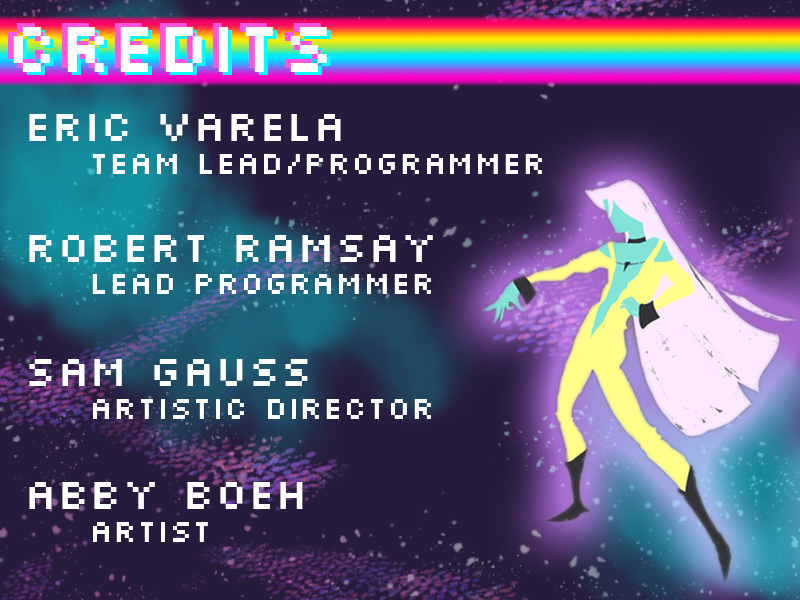
<style>
.page{position:relative;width:800px;height:600px}
.page>*{position:absolute;margin:0}
.t1{font:75px "Silkscreen"}
.t2{font:75px "Silkscreen";color:#ffffff}
.t3{font:45.8px "Silkscreen";color:#ffffff}
.t4{font:33.3px "Silkscreen";color:#ffffff}
</style>
<div class="page">
<p class="t1" style="left:7px;top:23px;width:314px;height:45px">Credits</p>
<p class="t2" style="left:13px;top:27px;width:314px;height:45px">Credits</p>
<p class="t1" style="left:17px;top:30px;width:314px;height:45px">Credits</p>
<p class="t3" style="left:29px;top:114px;width:312px;height:27px">Eric Varela</p>
<p class="t4" style="left:93px;top:154px;width:449px;height:20px">Team Lead/Programmer</p>
<p class="t3" style="left:29px;top:235px;width:404px;height:27px">Robert Ramsay<br>vv</p>
<p class="t4" style="left:92px;top:274px;width:339px;height:20px">Lead Programmer</p>
<p class="t3" style="left:29px;top:359px;width:279px;height:27px">Sam Gauss</p>
<p class="t4" style="left:93px;top:399px;width:338px;height:20px">Artistic Director</p>
<p class="t3" style="left:29px;top:482px;width:274px;height:27px">Abby Boeh</p>
<p class="t4" style="left:93px;top:522px;width:115px;height:20px">Artist</p>
</div>
